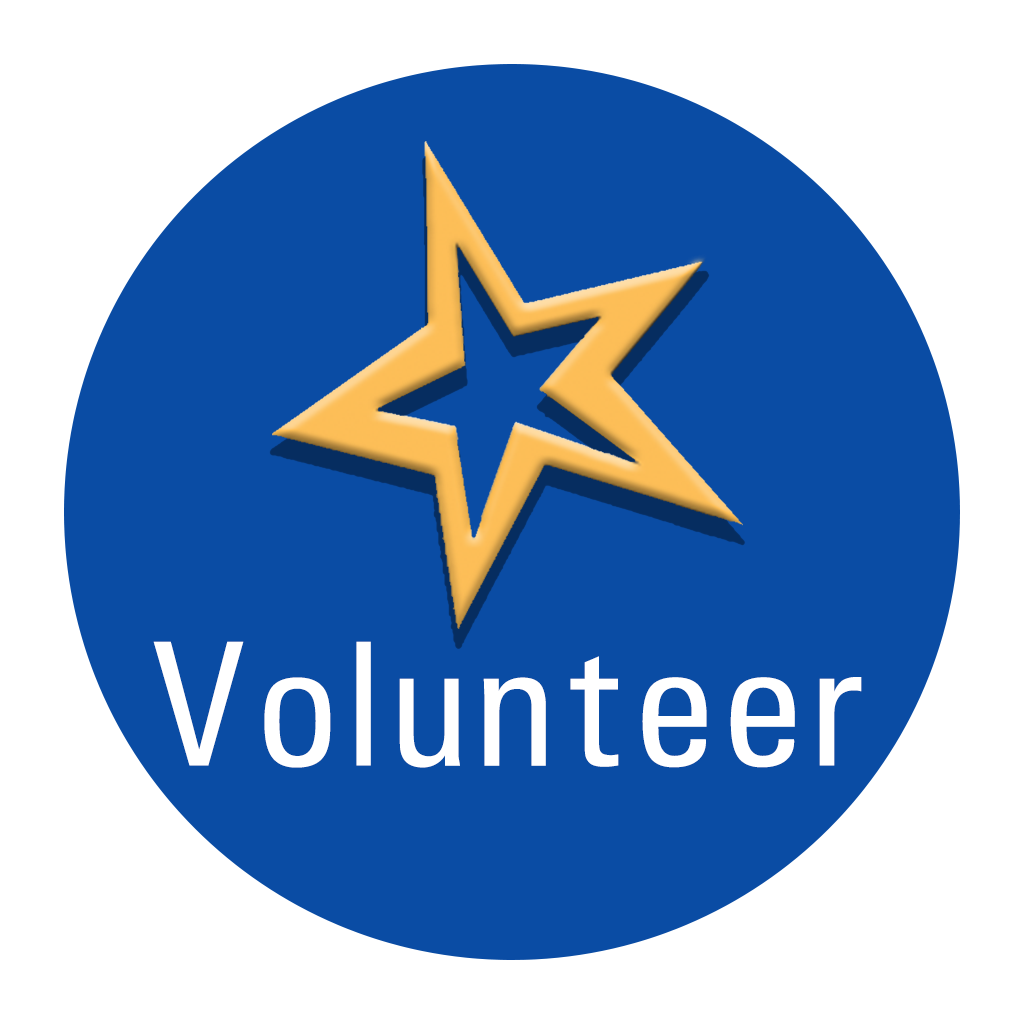
<style>
.page{position:relative;width:1024px;height:1024px;background:#0a4ca4}
.page>*{position:absolute;margin:0}
.t1{font:156px "UniformCondensedBook";letter-spacing:0.05em;color:#ffffff}
</style>
<div class="page">
<p class="t1" style="left:153px;top:641px;width:709px;height:127px">Volunteer</p>
</div>
